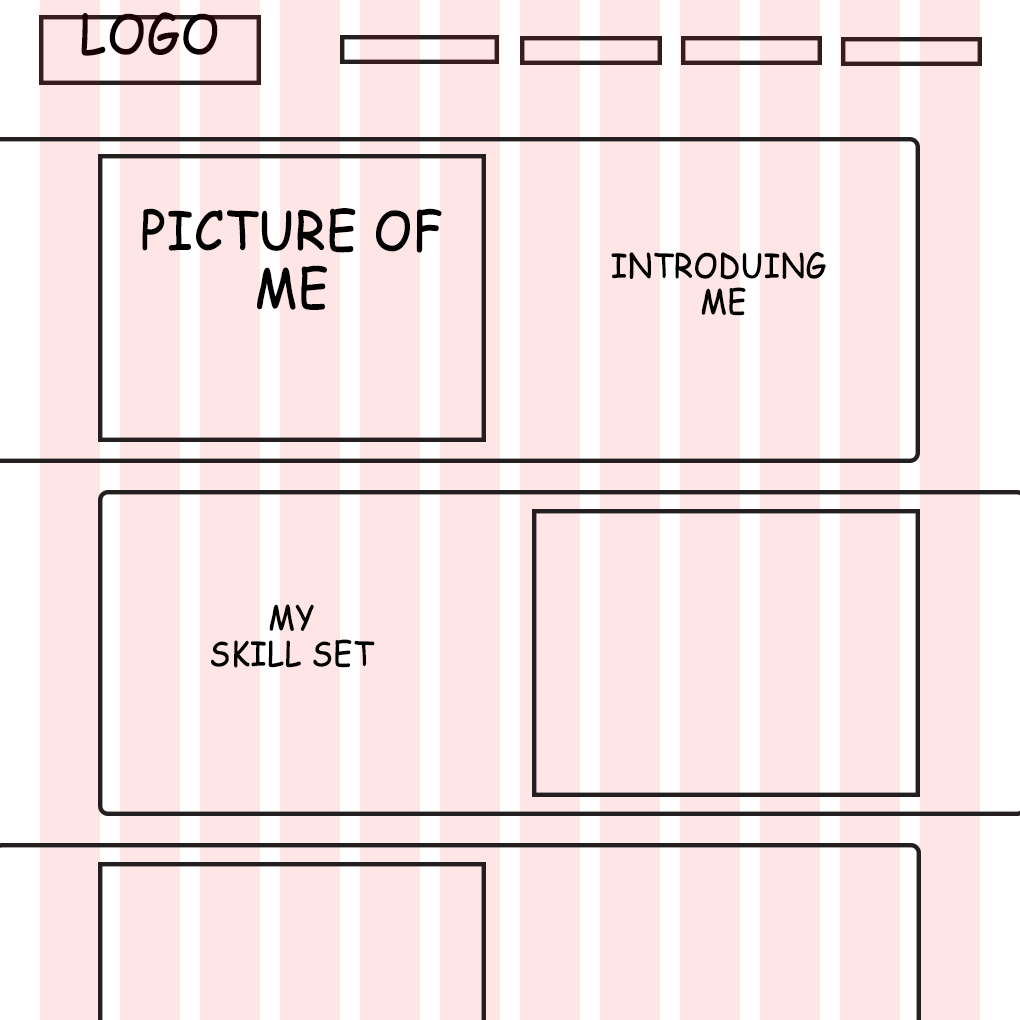
<style>
.page{position:relative;width:1020px;height:1020px;background:#ffe5e5}
.page>*{position:absolute;margin:0}
.t1{font:52.8px "ComicSansMS";color:#1a0000;text-transform:uppercase;font-weight:bold;scale:0.91 1}
.t2{font:52.8px "ComicSansMS";color:#000000;text-transform:uppercase;font-weight:bold;scale:0.91 1}
.t3{font:33px "ComicSansMS";color:#000000;text-transform:uppercase;font-weight:bold;scale:0.91 1}
</style>
<div class="page">
<p class="t1" style="left:81px;top:12px;width:137px;height:44px">Logo</p>
<p class="t2" style="left:142px;top:208px;width:300px;height:102px;text-align:center">Picture of me</p>
<p class="t3" style="left:611px;top:252px;width:215px;height:64px;text-align:center">Introduing<br> me</p>
<p class="t3" style="left:211px;top:604px;width:164px;height:64px;text-align:center">my <br>Skill set</p>
</div>
